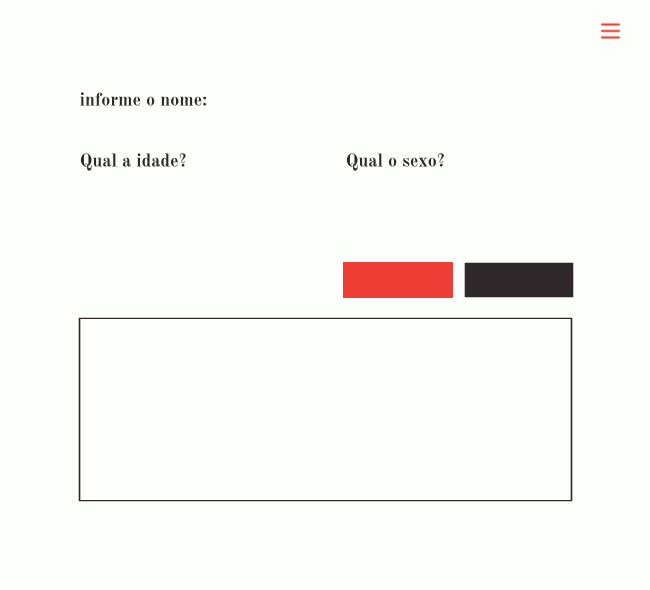
<style>
.page{position:relative;width:650px;height:590px;background:#fdfffb}
.page>*{position:absolute;margin:0}
.t1{font:18px "OldStandardTT-Bold";color:#2e282a}
</style>
<div class="page">
<p class="t1" style="left:80px;top:92px;width:127px;height:14px">informe o nome:</p>
<p class="t1" style="left:80px;top:153px;width:106px;height:18px">Qual a idade?</p>
<p class="t1" style="left:346px;top:153px;width:98px;height:18px">Qual o sexo?</p>
</div>
